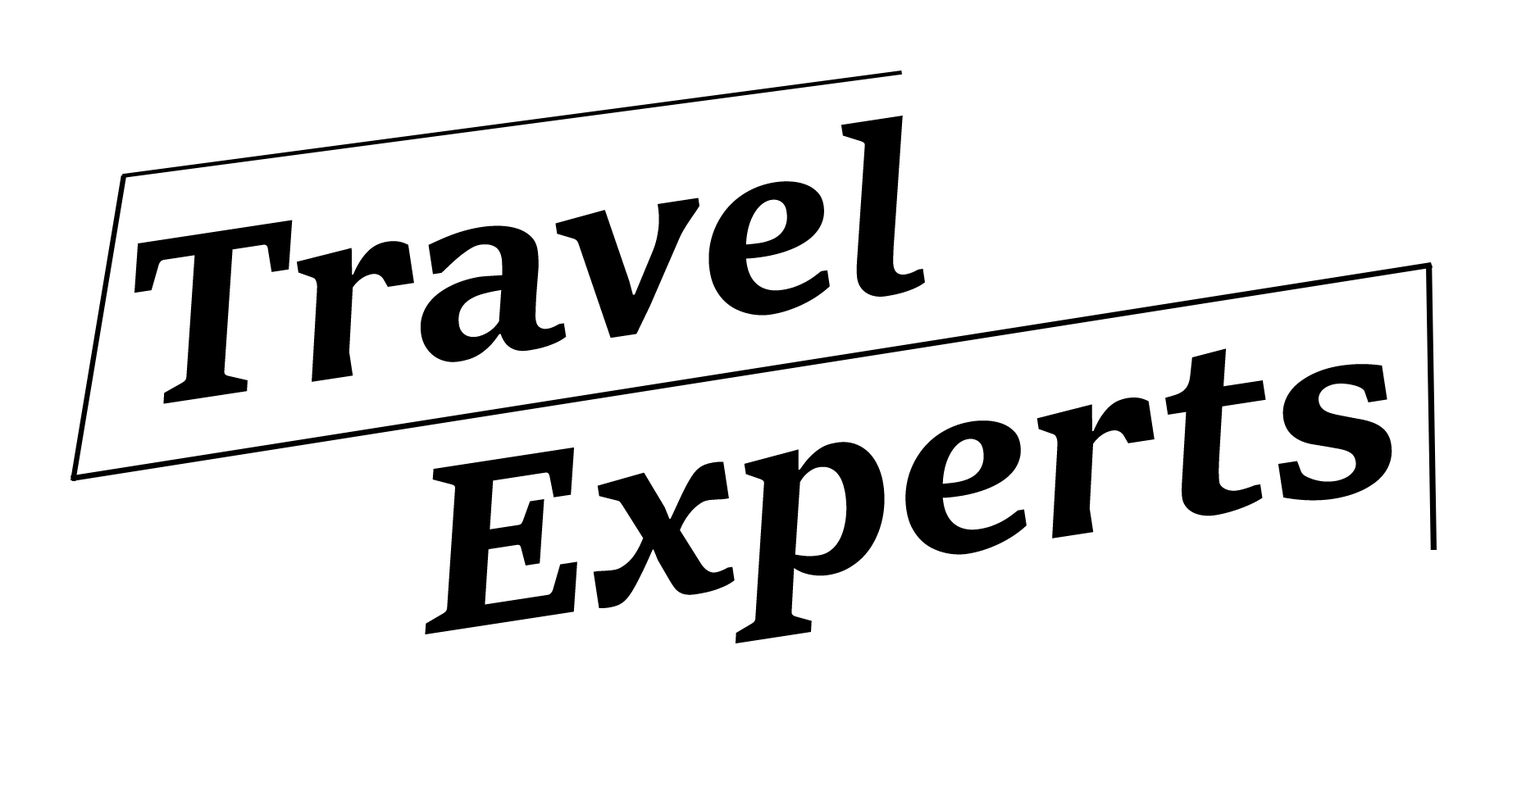
<style>
.page{position:relative;width:1517px;height:786px;background:#ffffff}
.page>*{position:absolute;margin:0}
.t1{font:245.9px "SitkaSmall-BoldItalic";color:#000000}
</style>
<div class="page">
<p class="t1" style="left:134px;top:116px;width:791px;height:288px;rotate:-9deg">Travel</p>
<p class="t1" style="left:425px;top:348px;width:967px;height:296px;rotate:-9deg">Experts</p>
</div>
